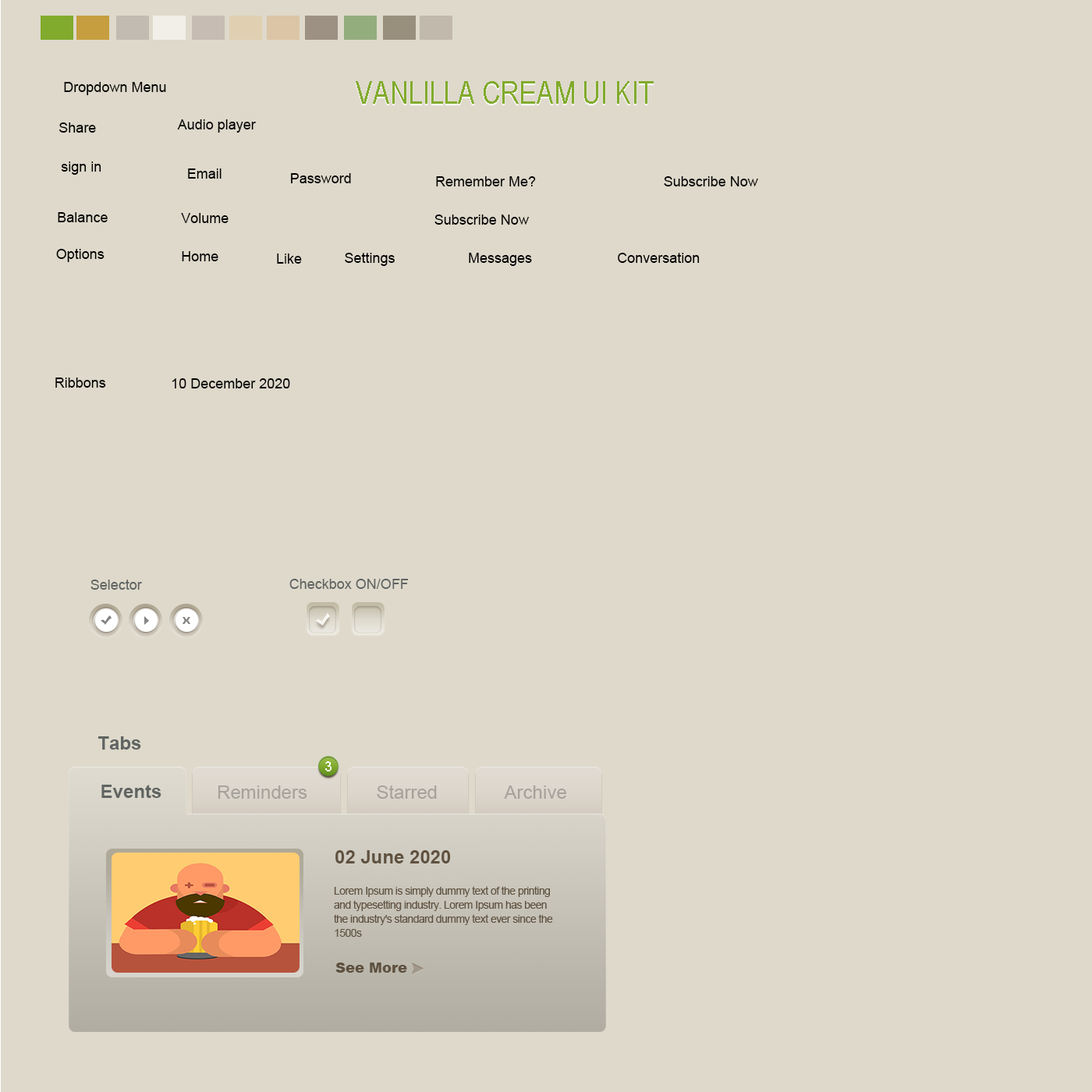
<style>
.page{position:relative;width:1092px;height:1092px;background:#ded9cb}
.page>*{position:absolute;margin:0}
.t1{font:14px "ArialMT";color:#000000}
.t2{font:31.2px "ArialNarrow";color:#81ab2d}
.t3{font:14px "ArialMT";color:#606462}
.t4{font:18.7px "Arial-BoldMT";color:#606462}
.t5{font:14px "ArialMT";color:#ffffff}
.t6{font:18.7px "ArialMT";color:#a5a29c}
.t7{font:18.7px "Arial-BoldMT";color:#5f513f}
.t8{font:10.9px/14px "ArialMT";letter-spacing:-0.04em;color:#5f513f}
.t9{font:14px "Arial-Black";color:#5f513f}
</style>
<div class="page">
<p class="t1" style="left:64px;top:82px;width:102px;height:13px">Dropdown Menu</p>
<p class="t2" style="left:356px;top:81px;width:298px;height:23px">VANLILLA CREAM UI KIT</p>
<p class="t1" style="left:59px;top:122px;width:37px;height:11px">Share</p>
<p class="t1" style="left:177px;top:119px;width:79px;height:14px">Audio player</p>
<p class="t1" style="left:61px;top:161px;width:40px;height:14px">sign in</p>
<p class="t1" style="left:188px;top:168px;width:34px;height:11px">Email</p>
<p class="t1" style="left:291px;top:173px;width:60px;height:10px">Password</p>
<p class="t1" style="left:436px;top:176px;width:100px;height:10px">Remember Me?</p>
<p class="t1" style="left:664px;top:176px;width:94px;height:10px">Subscribe Now</p>
<p class="t1" style="left:58px;top:212px;width:50px;height:10px">Balance</p>
<p class="t1" style="left:181px;top:213px;width:48px;height:10px">Volume</p>
<p class="t1" style="left:434px;top:214px;width:96px;height:11px">Subscribe Now</p>
<p class="t1" style="left:56px;top:249px;width:49px;height:13px">Options</p>
<p class="t1" style="left:182px;top:251px;width:36px;height:10px">Home</p>
<p class="t1" style="left:277px;top:253px;width:25px;height:11px">Like</p>
<p class="t1" style="left:345px;top:253px;width:50px;height:13px">Settings</p>
<p class="t1" style="left:469px;top:253px;width:63px;height:13px">Messages</p>
<p class="t1" style="left:618px;top:253px;width:82px;height:10px">Conversation</p>
<p class="t1" style="left:55px;top:378px;width:51px;height:10px">Ribbons</p>
<p class="t1" style="left:172px;top:378px;width:118px;height:10px">10 December 2020</p>
<p class="t3" style="left:90px;top:580px;width:52px;height:10px">Selector</p>
<p class="t3" style="left:289px;top:579px;width:120px;height:10px">Checkbox ON/OFF</p>
<p class="t4" style="left:98px;top:736px;width:43px;height:14px">Tabs</p>
<p class="t5" style="left:325px;top:761px;width:6px;height:10px">3</p>
<p class="t4" style="left:101px;top:785px;width:60px;height:13px">Events</p>
<p class="t6" style="left:218px;top:785px;width:89px;height:14px">Reminders</p>
<p class="t6" style="left:377px;top:785px;width:60px;height:14px">Starred</p>
<p class="t6" style="left:504px;top:785px;width:62px;height:14px">Archive</p>
<p class="t7" style="left:335px;top:850px;width:116px;height:13px">02 June 2020</p>
<p class="t8" style="left:334px;top:886px;width:219px;height:51px">Lorem Ipsum is simply dummy text of the printing and typesetting industry. Lorem Ipsum has been the industry's standard dummy text ever since the 1500s</p>
<p class="t9" style="left:335px;top:963px;width:72px;height:10px">See More</p>
</div>
